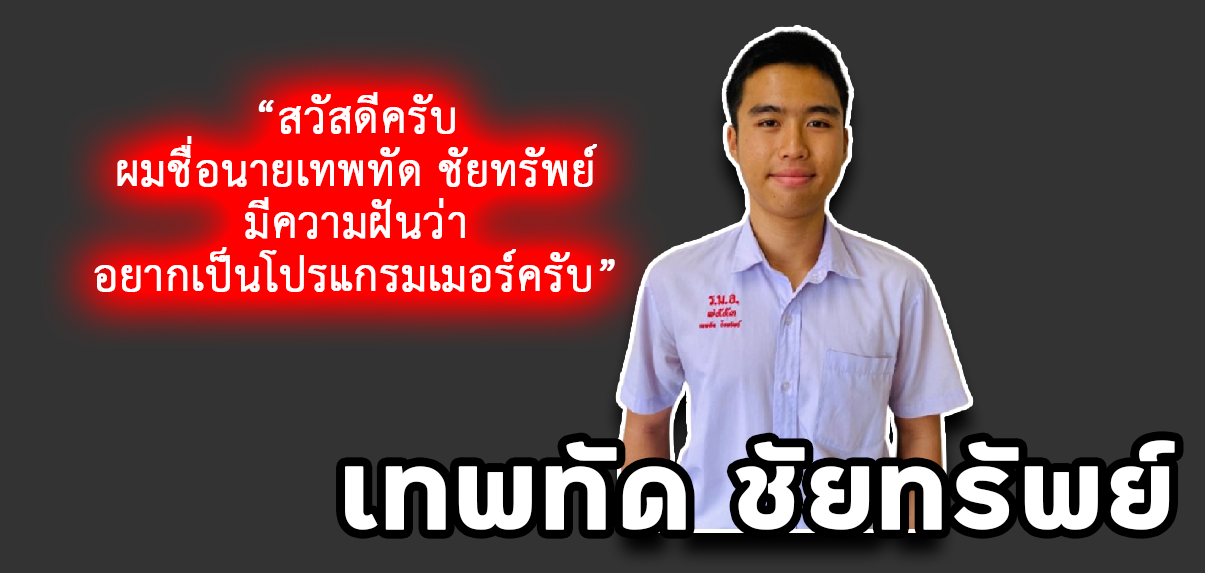
<style>
.page{position:relative;width:1205px;height:573px;background:#333333}
.page>*{position:absolute;margin:0}
.t1{font:62px/52.8px "THSarabunPSK";color:#ffffff;font-weight:bold}
.t2{font:138.3px "FCFridayMedium";color:#ffffff;font-weight:bold}
</style>
<div class="page">
<p class="t1" style="left:94px;top:92px;width:521px;height:200px;text-align:center">“สวัสดีครับ<br>ผมชื่อนายเทพทัด ชัยทรัพย์<br>มีความฝันว่า<br>อยากเป็นโปรแกรมเมอร์ครับ”</p>
<p class="t2" style="left:345px;top:440px;width:830px;height:90px">เทพทัด ชัยทรัพย์</p>
</div>
